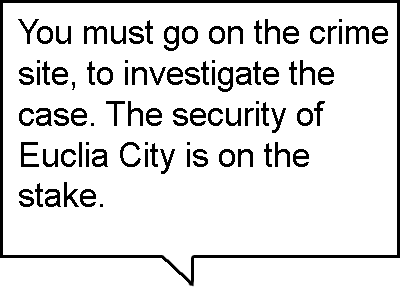
<style>
.page{position:relative;width:400px;height:300px;background:#ffffff}
.page>*{position:absolute;margin:0}
.t1{font:34px "ArialMT";color:#000000}
</style>
<div class="page">
<p class="t1" style="left:18px;top:19px;width:370px;height:188px">You must go on the crime <br>site, to investigate the<br>case. The security of <br>Euclia City is on the <br>stake.</p>
</div>
